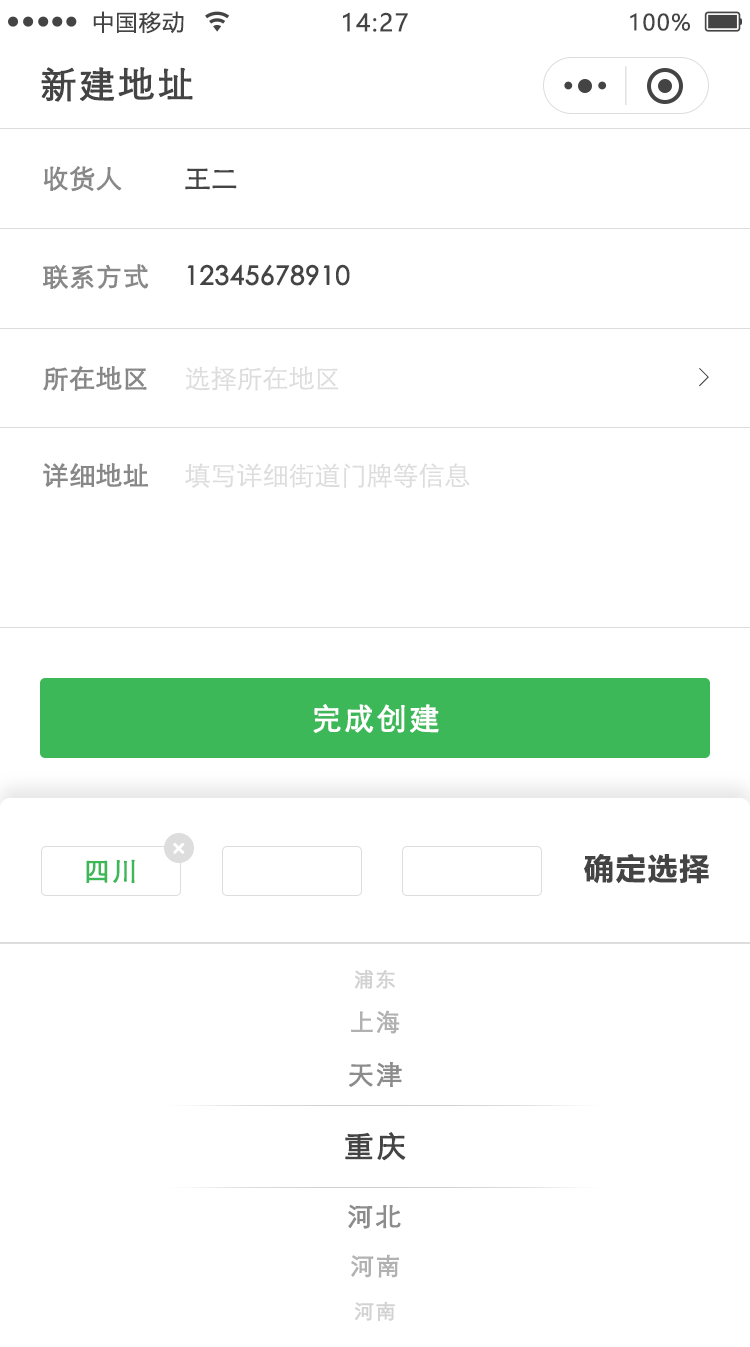
<style>
.page{position:relative;width:750px;height:1347px;background:#ffffff}
.page>*{position:absolute;margin:0}
.t1{font:22px "MicrosoftYaHei";letter-spacing:0.06em;color:#444444}
.t2{font:24px "MicrosoftYaHei";letter-spacing:0.06em;color:#444444}
.t3{font:36px "STXihei";letter-spacing:0.06em;color:#444444;font-weight:bold}
.t4{font:26px "STXihei";color:#888888;font-weight:bold}
.t5{font:26px "STXihei";color:#444444;font-weight:bold}
.t6{font:26px "STXihei";color:#dddddd}
.t7{font:26px "SimSun";color:#444444}
.t8{font:30px "STXihei";letter-spacing:0.06em;color:#ffffff;font-weight:bold}
.t9{font:30px "MicrosoftYaHei-Bold";letter-spacing:0.06em;color:#444444}
.t10{font:26px "STXihei";letter-spacing:0.06em;color:#3db858;font-weight:bold}
.t11{font:20px "STXihei";letter-spacing:0.06em;color:#d2d2d2;font-weight:bold}
.t12{font:24px "STXihei";letter-spacing:0.06em;color:#b1b1b1;font-weight:bold}
.t13{font:26px "STXihei";letter-spacing:0.06em;color:#8c8c8c;font-weight:bold}
.t14{font:30px "STXihei";letter-spacing:0.06em;color:#444444;font-weight:bold}
</style>
<div class="page">
<p class="t1" style="left:93px;top:11px;width:91px;height:23px">中国移动</p>
<p class="t2" style="left:343px;top:12px;width:65px;height:20px">14:27</p>
<p class="t1" style="left:630px;top:13px;width:60px;height:18px">100%</p>
<p class="t3" style="left:41px;top:67px;width:152px;height:35px">新建地址</p>
<p class="t4" style="left:43px;top:166px;width:79px;height:26px">收货人</p>
<p class="t5" style="left:185px;top:168px;width:52px;height:22px">王二</p>
<p class="t4" style="left:42px;top:264px;width:107px;height:25px">联系方式</p>
<p class="t5" style="left:187px;top:264px;width:163px;height:22px">12345678910</p>
<p class="t4" style="left:43px;top:366px;width:104px;height:25px">所在地区</p>
<p class="t6" style="left:185px;top:366px;width:153px;height:25px">选择所在地区</p>
<p class="t7" style="left:699px;top:368px;width:10px;height:19px">&gt;</p>
<p class="t4" style="left:43px;top:463px;width:105px;height:25px">详细地址</p>
<p class="t6" style="left:185px;top:463px;width:285px;height:25px">填写详细街道门牌等信息</p>
<p class="t8" style="left:313px;top:704px;width:126px;height:29px">完成创建</p>
<p class="t9" style="left:584px;top:853px;width:125px;height:31px">确定选择</p>
<p class="t10" style="left:86px;top:859px;width:49px;height:24px">四川</p>
<p class="t11" style="left:354px;top:969px;width:41px;height:20px">浦东</p>
<p class="t12" style="left:351px;top:1010px;width:49px;height:24px">上海</p>
<p class="t13" style="left:349px;top:1061px;width:53px;height:26px">天津</p>
<p class="t14" style="left:345px;top:1132px;width:61px;height:29px">重庆</p>
<p class="t13" style="left:348px;top:1204px;width:53px;height:25px">河北</p>
<p class="t12" style="left:351px;top:1254px;width:48px;height:24px">河南</p>
<p class="t11" style="left:355px;top:1301px;width:40px;height:20px">河南</p>
</div>
